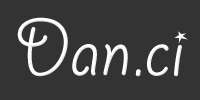
<style>
.page{position:relative;width:200px;height:100px;background:#333333}
.page>*{position:absolute;margin:0}
.t1{font:90px "GiddyupStd";color:#ffffff}
</style>
<div class="page">
<p class="t1" style="left:17px;top:17px;width:171px;height:60px">Dan.ci</p>
</div>
